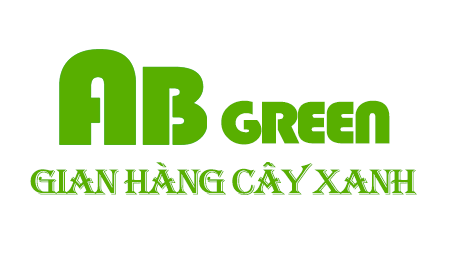
<style>
.page{position:relative;width:450px;height:266px;background:#ffffff}
.page>*{position:absolute;margin:0}
.t1{font:62.2px "Bauhaus93";letter-spacing:-0.07em;color:#58af00;scale:1.12 1}
.t2{font:37.3px "Algerian";letter-spacing:-0.07em;color:#58af00;scale:1.12 1}
</style>
<div class="page">
<p class="t1" style="left:221px;top:100px;width:169px;height:45px">GREEN</p>
<p class="t2" style="left:30px;top:162px;width:387px;height:33px">Gian hàng cây xanh</p>
</div>
